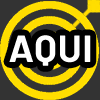
<style>
.page{position:relative;width:100px;height:100px;background:#333333}
.page>*{position:absolute;margin:0}
.t1{font:38px "Barlow-Bold";letter-spacing:0.025em;color:#ffffff}
</style>
<div class="page">
<p class="t1" style="left:9px;top:35px;width:82px;height:31px">AQUI</p>
</div>
